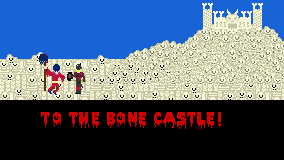
<style>
.page{position:relative;width:284px;height:160px;background:#000000}
.page>*{position:absolute;margin:0}
.t1{font:14px "PiecesNFI";letter-spacing:0.06em;color:#d20000}
</style>
<div class="page">
<p class="t1" style="left:41px;top:112px;width:180px;height:17px">To the bone castle!</p>
</div>
